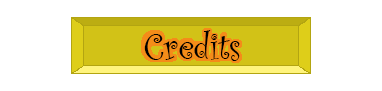
<style>
.page{position:relative;width:382px;height:91px;background:#ffffff}
.page>*{position:absolute;margin:0}
.t1{font:37.5px "CurlzMT";color:#000000}
</style>
<div class="page">
<p class="t1" style="left:144px;top:30px;width:96px;height:31px">Credits</p>
</div>
